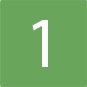
<style>
.page{position:relative;width:87px;height:87px;background:#69a55a}
.page>*{position:absolute;margin:0}
.t1{font:72px "MyriadPro-Regular";color:#ffffff}
</style>
<div class="page">
<p class="t1" style="left:32px;top:20px;width:16px;height:47px">1</p>
</div>
